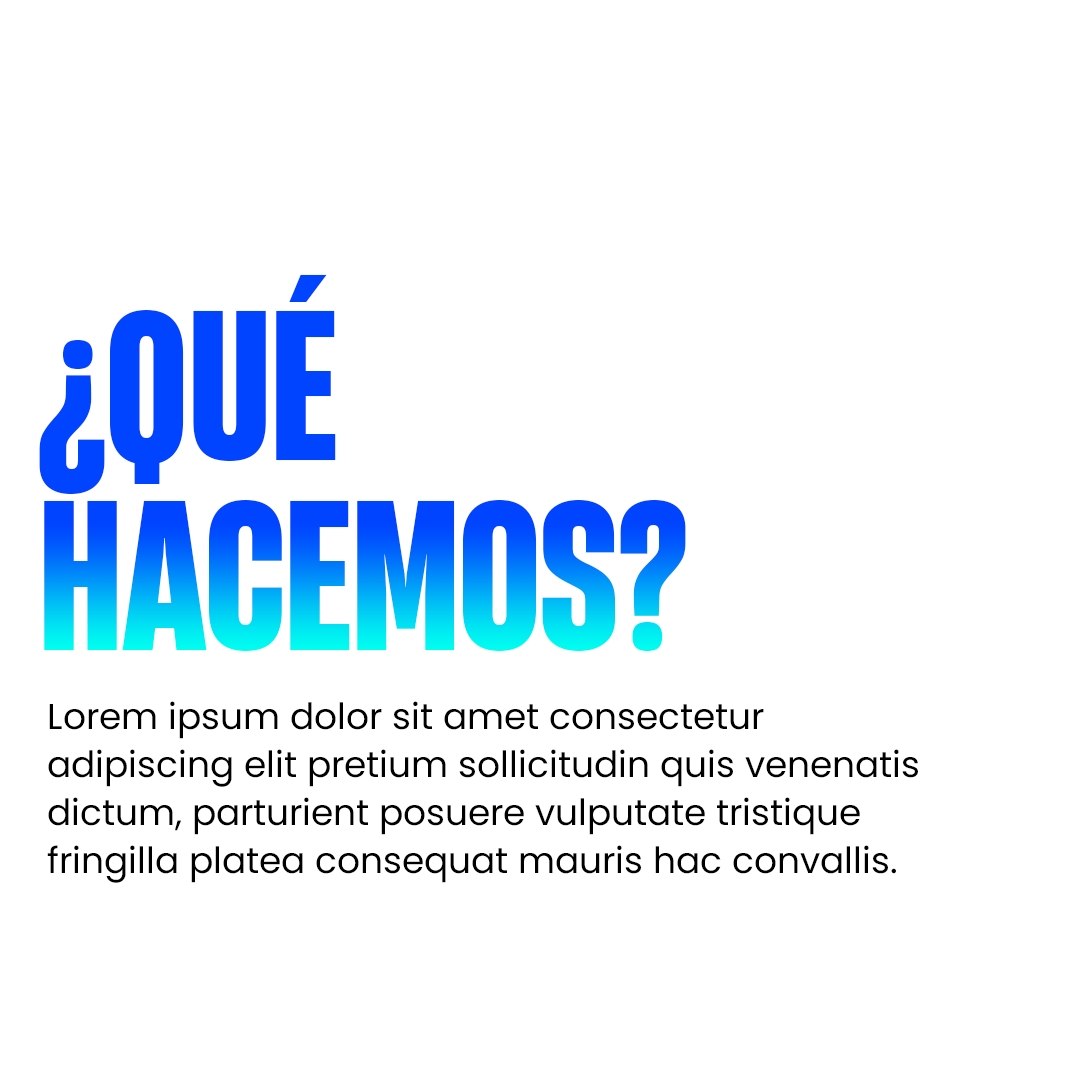
<style>
.page{position:relative;width:1080px;height:1080px;background:#ffffff}
.page>*{position:absolute;margin:0}
.t1{font:200px "HeadingNowTrial-47Extrabold";color:#0044ff}
.t2{font:200px "HeadingNowTrial-47Extrabold"}
.t3{font:36px/48px "Poppins-Regular";color:#000000}
</style>
<div class="page">
<p class="t1" style="left:39px;top:274px;width:297px;height:220px">¿QUÉ</p>
<p class="t2" style="left:44px;top:499px;width:642px;height:152px">HACEMOS?</p>
<p class="t3" style="left:47px;top:701px;width:871px;height:182px">Lorem ipsum dolor sit amet consectetur <br>adipiscing elit pretium sollicitudin quis venenatis <br>dictum, parturient posuere vulputate tristique <br>fringilla platea consequat mauris hac convallis.</p>
</div>
